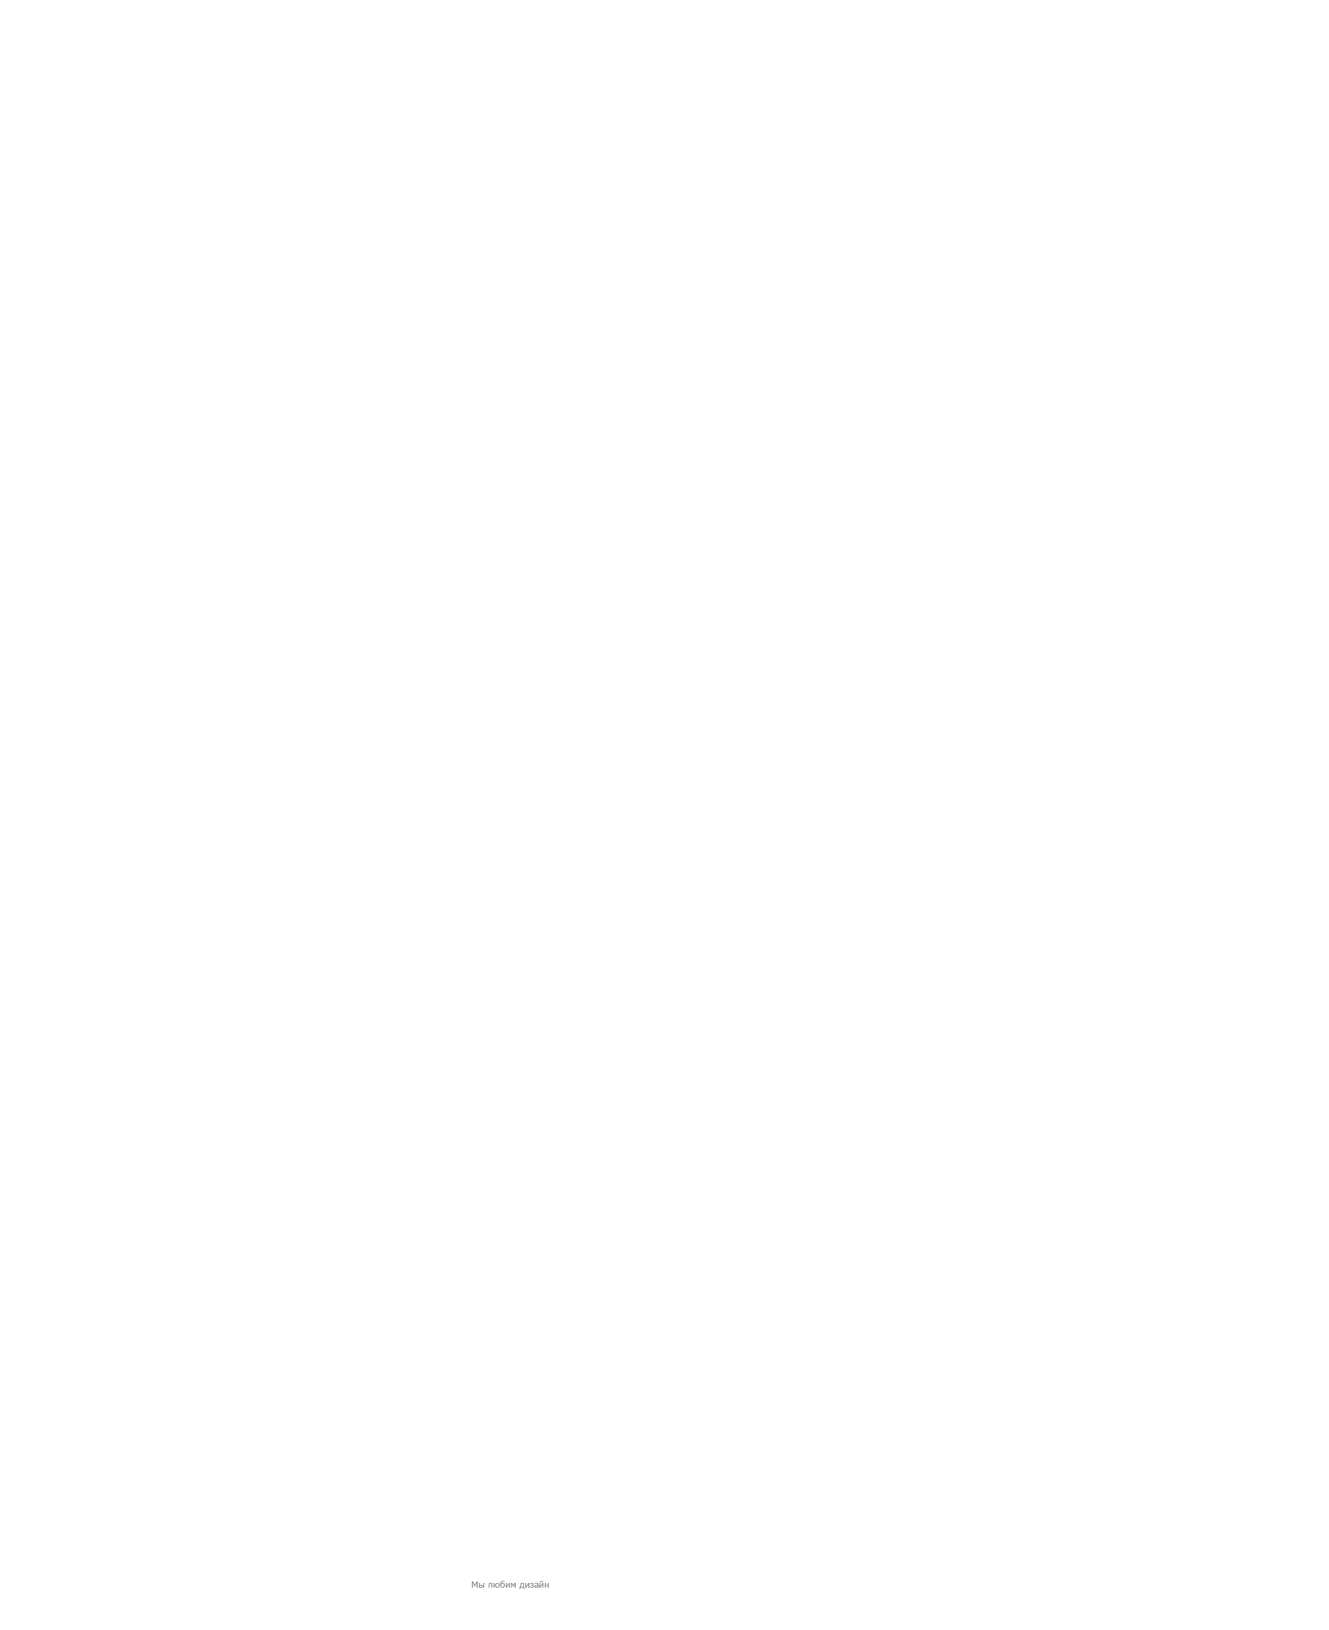
<style>
.page{position:relative;width:1329px;height:1630px;background:#ffffff}
.page>*{position:absolute;margin:0}
.t1{font:9px "Tahoma";letter-spacing:0.02em;color:#909090}
</style>
<div class="page">
<p class="t1" style="left:471px;top:1581px;width:78px;height:8px">Мы любим дизайн</p>
</div>
